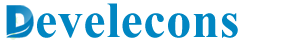
<style>
.page{position:relative;width:300px;height:40px;background:#ffffff}
.page>*{position:absolute;margin:0}
.t1{font:50.2px "TimesNewRomanPS-BoldMT";letter-spacing:0.01em;color:#0086c2}
</style>
<div class="page">
<p class="t1" style="left:37px;top:3px;width:201px;height:35px">evelecons</p>
</div>
